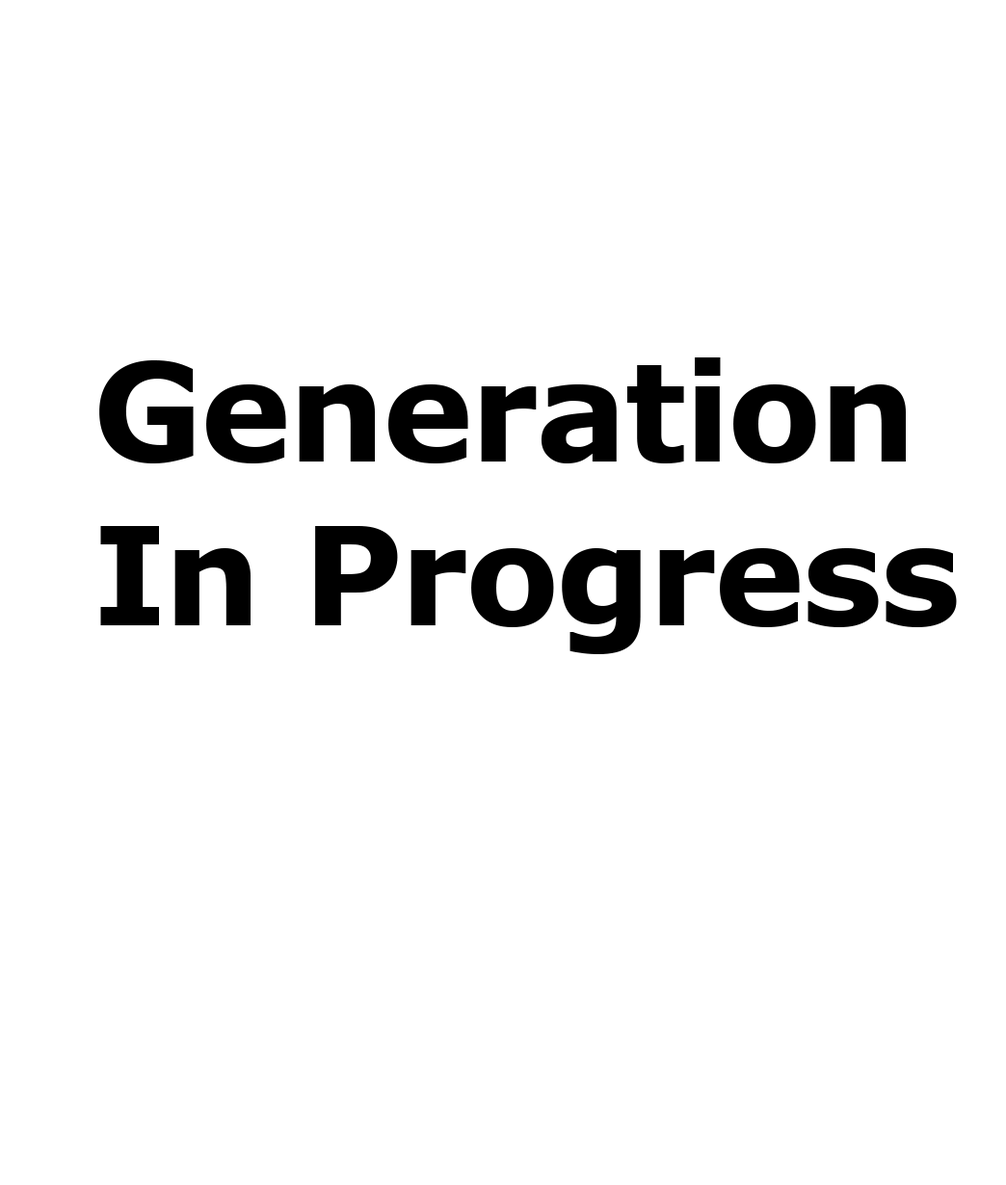
<style>
.page{position:relative;width:1006px;height:1185px;background:#ffffff}
.page>*{position:absolute;margin:0}
.t1{font:136.5px "Verdana-Bold";letter-spacing:-0.02em;color:#000000}
</style>
<div class="page">
<p class="t1" style="left:99px;top:358px;width:858px;height:296px">Generation<br>In Progress</p>
</div>
